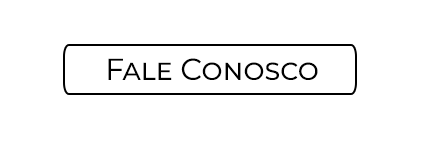
<style>
.page{position:relative;width:426px;height:141px;background:#ffffff}
.page>*{position:absolute;margin:0}
.t1{font:30px "Montserrat-Regular";color:#000000;font-variant:small-caps}
</style>
<div class="page">
<p class="t1" style="left:108px;top:58px;width:210px;height:22px">Fale Conosco</p>
</div>
